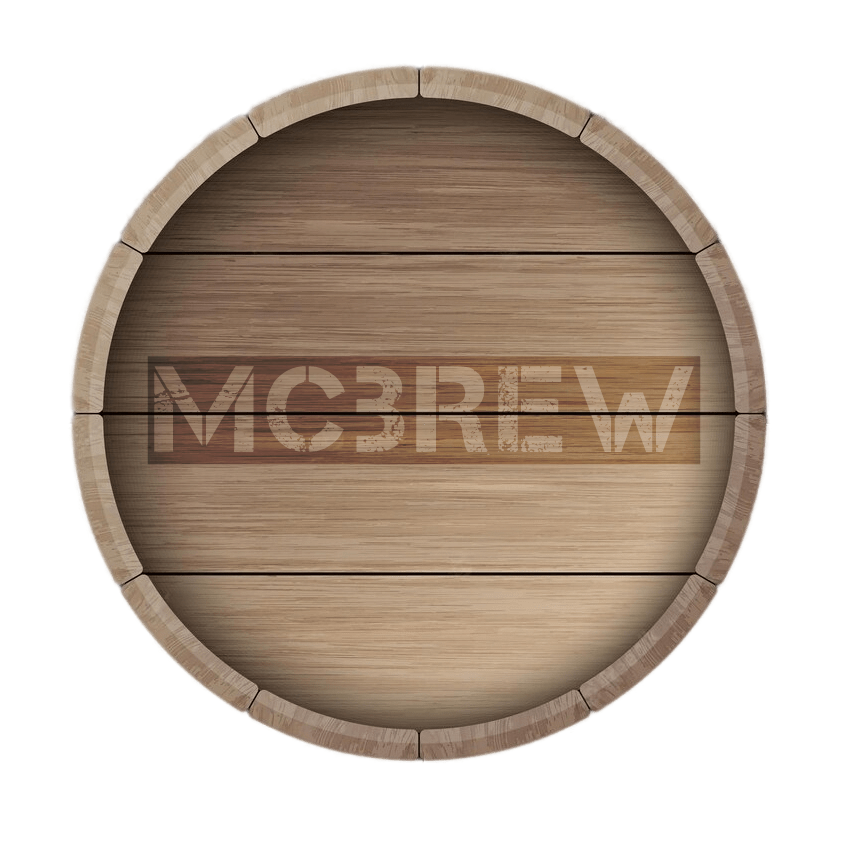
<style>
.page{position:relative;width:848px;height:848px;background:#ffffff}
.page>*{position:absolute;margin:0}
.t1{font:122.5px "Captureit2"}
</style>
<div class="page">
<p class="t1" style="left:147px;top:356px;width:554px;height:109px">McBrew</p>
</div>
